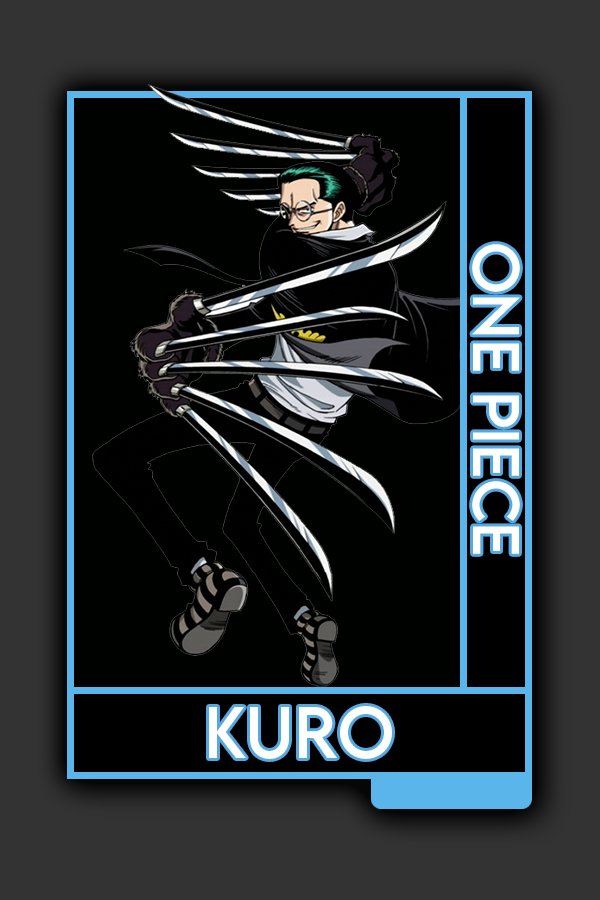
<style>
.page{position:relative;width:600px;height:900px;background:#000200}
.page>*{position:absolute;margin:0}
.t1{font:58.4px "LEMONMILK-Regular";color:#ffffff}
.t2{font:65.2px "LEMONMILK-Regular";color:#ffffff}
</style>
<div class="page">
<p class="t1" style="left:472px;top:244px;width:48px;height:310px;rotate:90deg">One Piece</p>
<p class="t2" style="left:209px;top:706px;width:183px;height:53px">Kuro</p>
</div>
